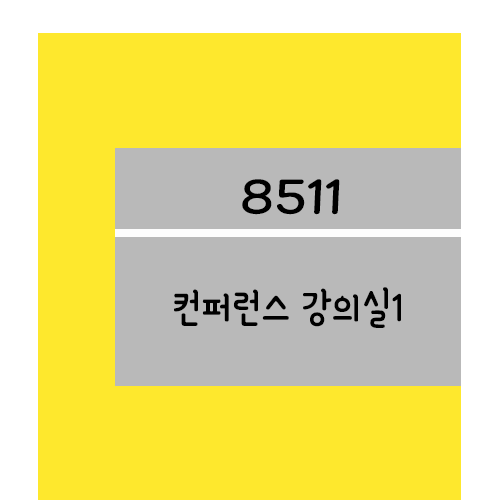
<style>
.page{position:relative;width:500px;height:500px;background:#fee82d}
.page>*{position:absolute;margin:0}
.t1{font:61.2px "YanoljaYacheR";color:#000000;scale:1.18 1}
.t2{font:48px "YanoljaYacheR";color:#000000}
</style>
<div class="page">
<p class="t1" style="left:242px;top:179px;width:98px;height:36px">8511</p>
<p class="t2" style="left:174px;top:287px;width:227px;height:41px">컨퍼런스 강의실1</p>
</div>
